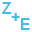
<style>
.page{position:relative;width:32px;height:32px;background:#ffffff}
.page>*{position:absolute;margin:0}
.t1{font:16px "Arial-BoldMT";color:#46bde9}
</style>
<div class="page">
<p class="t1" style="left:1px;top:2px;width:11px;height:12px">Z</p>
<p class="t1" style="left:11px;top:13px;width:9px;height:8px">+</p>
<p class="t1" style="left:20px;top:18px;width:10px;height:12px">E</p>
</div>
